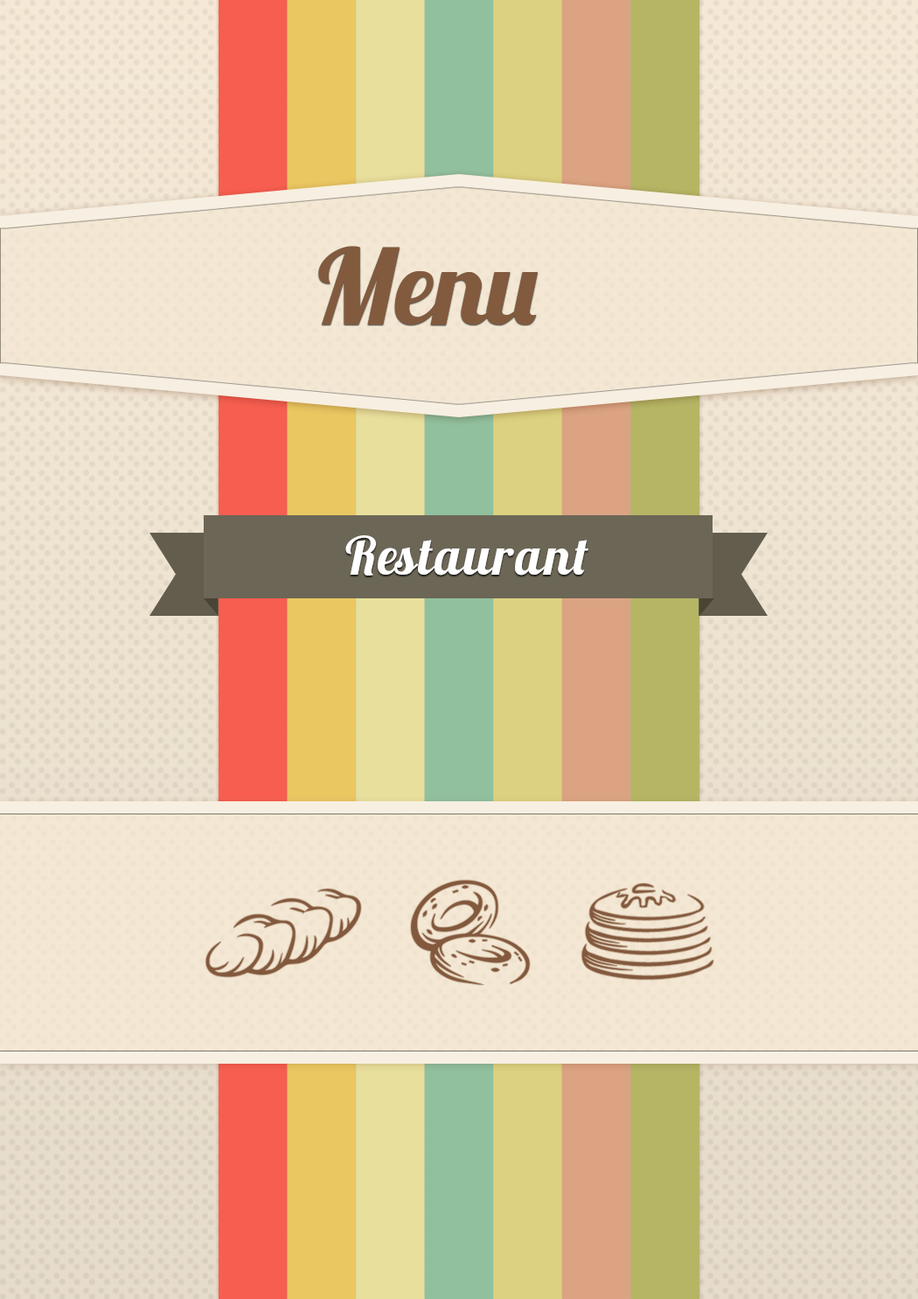
<style>
.page{position:relative;width:918px;height:1299px}
.page>*{position:absolute;margin:0}
.t1{font:104.9px "Lobster1.3";color:#825a3e}
.t2{font:52.5px "Lobster1.3";color:#ffffff}
</style>
<div class="page">
<p class="t1" style="left:318px;top:246px;width:220px;height:79px">Menu</p>
<p class="t2" style="left:345px;top:535px;width:244px;height:40px">Restaurant</p>
</div>
